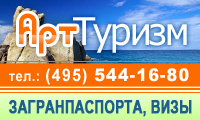
<style>
.page{position:relative;width:200px;height:120px}
.page>*{position:absolute;margin:0}
.t1{font:38px "Sabomaster"}
.t2{font:38px "Tahoma";letter-spacing:-0.05em;color:#ffffff}
.t3{font:17.6px "Arial-Black";letter-spacing:0.075em;color:#ffffff;scale:0.91 1}
.t4{font:14.3px "Arial-BoldMT";letter-spacing:0.025em;color:#ffffff;scale:0.91 1}
.t5{font:17.6px "Arial-BoldMT";letter-spacing:0.075em;color:#ffffff;scale:0.91 1}
.t6{font:17.6px "ArialNarrow-Bold";color:#1d608f;font-weight:bold;scale:0.91 1}
</style>
<div class="page">
<p class="t1" style="left:19px;top:13px;width:58px;height:41px">Арт</p>
<p class="t2" style="left:73px;top:17px;width:114px;height:36px">Туризм</p>
<p class="t3" style="left:9px;top:68px;width:180px;height:17px"><span class="t4">тел.: </span><span class="t5">(495) </span>544-16-80</p>
<p class="t6" style="left:9px;top:100px;width:183px;height:17px">ЗАГРАНПАСПОРТА, ВИЗЫ</p>
</div>
